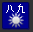
<style>
.page{position:relative;width:33px;height:32px;background:#000090}
.page>*{position:absolute;margin:0}
.t1{font:10.4px "SimSun";color:#ffffff}
</style>
<div class="page">
<p class="t1" style="left:6px;top:4px;width:19px;height:9px">八九</p>
</div>
